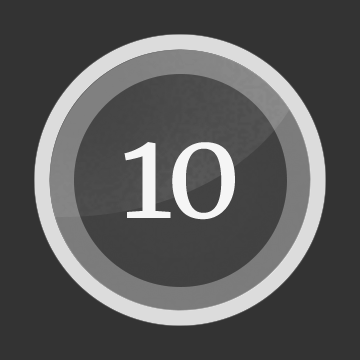
<style>
.page{position:relative;width:360px;height:360px;background:#333333}
.page>*{position:absolute;margin:0}
.t1{font:120px "Merriweather-Regular";letter-spacing:-0.06em;color:#f5f5f5}
</style>
<div class="page">
<p class="t1" style="left:124px;top:142px;width:111px;height:78px">10</p>
</div>
